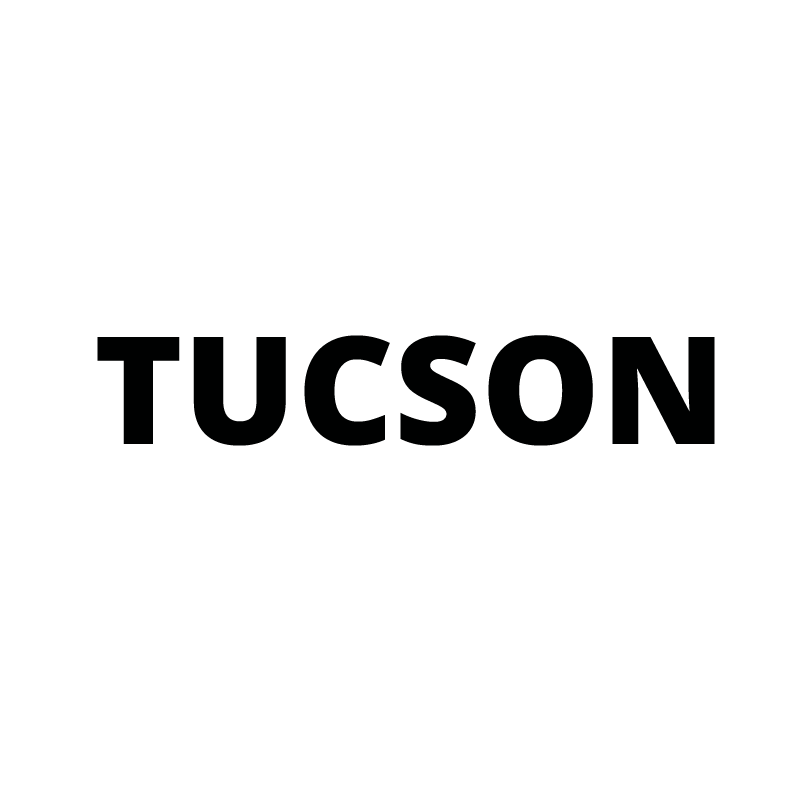
<style>
.page{position:relative;width:800px;height:800px;background:#ffffff}
.page>*{position:absolute;margin:0}
.t1{font:150px "OpenSans-Extrabold";color:#000101}
</style>
<div class="page">
<p class="t1" style="left:97px;top:335px;width:618px;height:111px">TUCSON</p>
</div>
